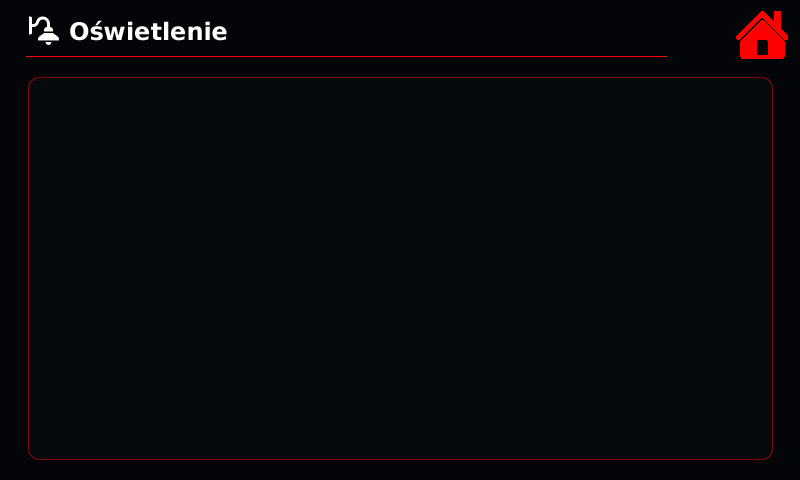
<style>
.page{position:relative;width:800px;height:480px;background:#06090d}
.page>*{position:absolute;margin:0}
.t1{font:24px "DejaVuSans-Bold";color:#ffffff}
</style>
<div class="page">
<p class="t1" style="left:70px;top:20px;width:157px;height:21px">Oświetlenie</p>
</div>
